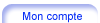
<style>
.page{position:relative;width:100px;height:23px;background:#ffffff}
.page>*{position:absolute;margin:0}
.t1{font:11px "ArialMT";color:#092ff6}
</style>
<div class="page">
<p class="t1" style="left:23px;top:12px;width:59px;height:11px">Mon compte</p>
</div>
